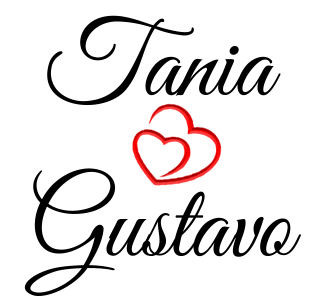
<style>
.page{position:relative;width:332px;height:298px;background:#ffffff}
.page>*{position:absolute;margin:0}
.t1{font:107px "GreatVibes-Regular";color:#000000}
</style>
<div class="page">
<p class="t1" style="left:47px;top:15px;width:234px;height:91px">Tania</p>
<p class="t1" style="left:24px;top:168px;width:277px;height:128px">Gustavo</p>
</div>
